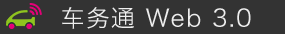
<style>
.page{position:relative;width:285px;height:34px;background:#333333}
.page>*{position:absolute;margin:0}
.t1{font:24px "HiraginoSansGB-W3";letter-spacing:0.05em;color:#eeeeee}
</style>
<div class="page">
<p class="t1" style="left:62px;top:7px;width:189px;height:22px">车务通 Web 3.0</p>
</div>
